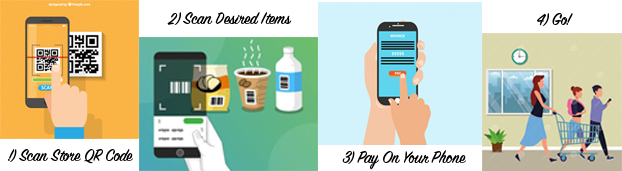
<style>
.page{position:relative;width:622px;height:171px}
.page>*{position:absolute;margin:0}
.t1{font:18px "SignPainter-HouseScript";color:#000000}
</style>
<div class="page">
<p class="t1" style="left:167px;top:12px;width:125px;height:13px">2) Scan Desired Items</p>
<p class="t1" style="left:537px;top:13px;width:36px;height:13px">4) Go!</p>
<p class="t1" style="left:8px;top:149px;width:125px;height:15px">!) Scan Store QR Code</p>
<p class="t1" style="left:342px;top:150px;width:124px;height:20px">3) Pay On Your Phone</p>
</div>
